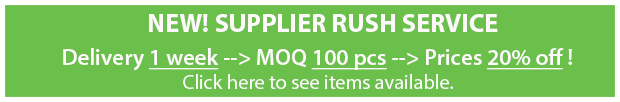
<style>
.page{position:relative;width:620px;height:102px;background:#6bc04b}
.page>*{position:absolute;margin:0}
.t1{font:26px "MyriadPro-Bold";color:#fdf9fb}
.t2{font:20.4px "MingLiU";color:#fdf9fb}
.t3{font:20.4px "MyriadPro-Bold";color:#060103}
.t4{font:23px "MyriadPro-Semibold";color:#fdf9fb}
.t5{font:23px "MyriadPro-Semibold";color:#fdf9fb;text-decoration:underline}
</style>
<div class="page">
<p class="t1" style="left:149px;top:14px;width:349px;height:18px">NEW! SUPPLIER RUSH SERVICE</p>
<p class="t2" style="left:63px;top:48px;width:509px;height:41px"><span class="t3">       <br></span><span class="t4">Delivery </span><span class="t5">1 week</span><span class="t4"> --&gt; MOQ </span><span class="t5">100 pcs</span><span class="t4"> --&gt; Prices </span><span class="t5">20% off</span><span class="t4"> !</span>  <br>                            Click here to see items available.</p>
</div>
